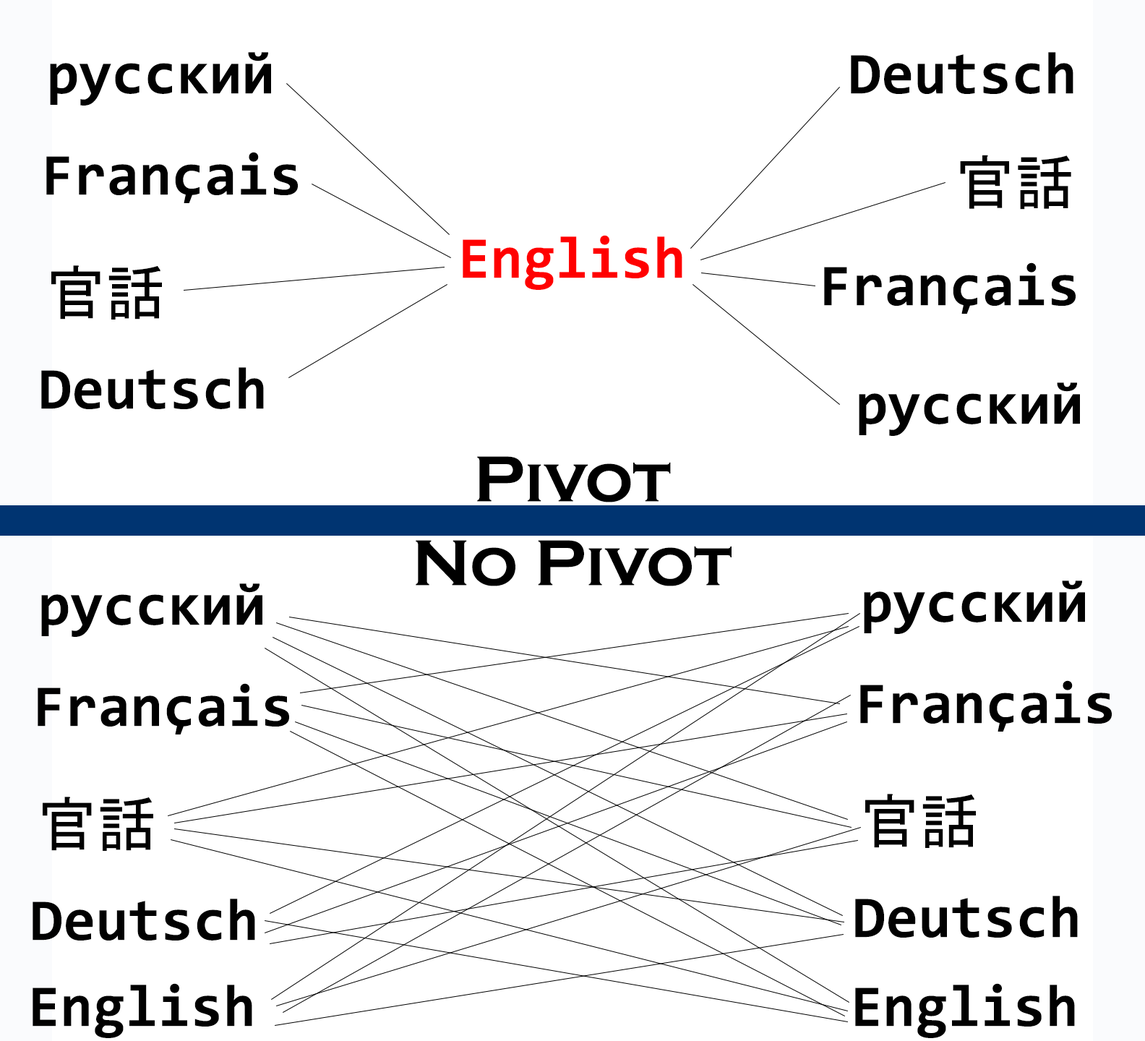
<style>
.page{position:relative;width:1145px;height:1041px;background:#ffffff}
.page>*{position:absolute;margin:0}
.t1{font:29.7px "Consolas-Bold";color:#010101}
.t2{font:29.7px "MS-Gothic";color:#010101}
.t3{font:29.7px "Consolas-Bold";color:#ff0101}
.t4{font:33.5px "CopperplateGothic-Bold";color:#000000}
</style>
<div class="page">
<p class="t1" style="left:50px;top:52px;width:221px;height:54px">русский</p>
<p class="t1" style="left:851px;top:52px;width:223px;height:42px">Deutsch</p>
<p class="t1" style="left:46px;top:152px;width:252px;height:51px">Français</p>
<p class="t2" style="left:960px;top:155px;width:112px;height:55px">官話</p>
<p class="t3" style="left:463px;top:235px;width:220px;height:55px">English</p>
<p class="t2" style="left:51px;top:265px;width:111px;height:55px">官話</p>
<p class="t1" style="left:824px;top:262px;width:252px;height:52px">Français</p>
<p class="t1" style="left:41px;top:367px;width:223px;height:42px">Deutsch</p>
<p class="t1" style="left:859px;top:382px;width:221px;height:54px">русский</p>
<p class="t4" style="left:477px;top:456px;width:194px;height:47px">Pivot</p>
<p class="t4" style="left:416px;top:540px;width:316px;height:46px">No Pivot</p>
<p class="t1" style="left:864px;top:581px;width:221px;height:53px">русский</p>
<p class="t1" style="left:41px;top:583px;width:221px;height:54px">русский</p>
<p class="t1" style="left:38px;top:683px;width:251px;height:52px">Français</p>
<p class="t1" style="left:860px;top:680px;width:252px;height:52px">Français</p>
<p class="t2" style="left:43px;top:797px;width:110px;height:54px">官話</p>
<p class="t2" style="left:865px;top:794px;width:111px;height:54px">官話</p>
<p class="t1" style="left:33px;top:899px;width:222px;height:42px">Deutsch</p>
<p class="t1" style="left:855px;top:896px;width:223px;height:42px">Deutsch</p>
<p class="t1" style="left:33px;top:983px;width:219px;height:55px">English</p>
<p class="t1" style="left:855px;top:983px;width:220px;height:55px">English</p>
</div>
